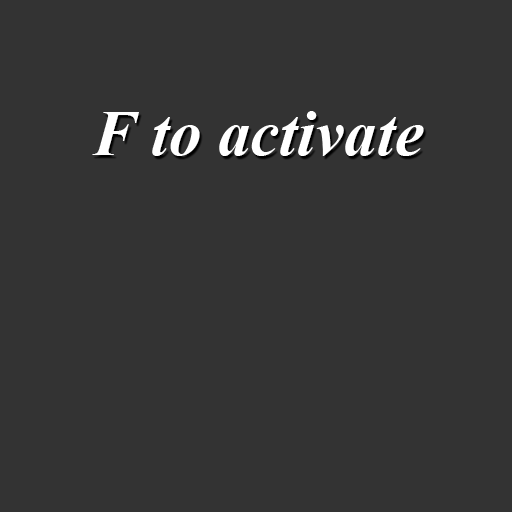
<style>
.page{position:relative;width:512px;height:512px;background:#333333}
.page>*{position:absolute;margin:0}
.t1{font:65.2px "TimesNewRomanPS-BoldItalicMT";color:#ffffff}
</style>
<div class="page">
<p class="t1" style="left:92px;top:111px;width:332px;height:45px">F to activate</p>
</div>
